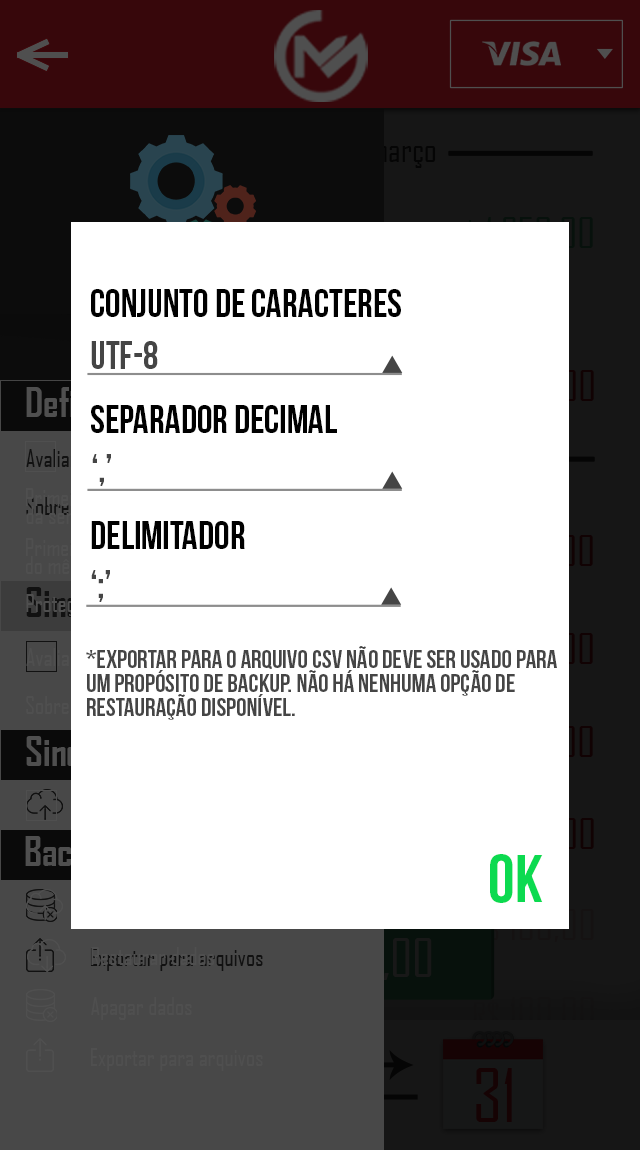
<style>
.page{position:relative;width:640px;height:1150px;background:#ffffff}
.page>*{position:absolute;margin:0}
.t1{font:39px "BebasNeue";color:#000000}
.t2{font:39px "BebasNeue";color:#454545}
.t3{font:26px/24px "BebasNeue";color:#454545}
.t4{font:67.7px "BebasNeue";color:#0cda50}
.t5{font:23.8px "AgencyFB-Reg";color:#4f4f4f}
</style>
<div class="page">
<p class="t1" style="left:91px;top:289px;width:310px;height:28px">Conjunto de caracteres</p>
<p class="t2" style="left:91px;top:341px;width:67px;height:28px">UTF-8</p>
<p class="t1" style="left:91px;top:405px;width:246px;height:28px">Separador decimal</p>
<p class="t2" style="left:92px;top:454px;width:19px;height:32px">‘,’</p>
<p class="t1" style="left:91px;top:521px;width:154px;height:28px">Delimitador</p>
<p class="t2" style="left:91px;top:570px;width:19px;height:32px">‘;’</p>
<p class="t3" style="left:86px;top:646px;width:471px;height:74px">*Exportar para o arquivo CSV não deve ser usado para <br>um propósito de backup. Não há nenhuma opção de <br>restauração disponível.</p>
<p class="t4" style="left:490px;top:854px;width:53px;height:49px">OK</p>
<p class="t5" style="left:91px;top:947px;width:123px;height:18px">Restaurar dados</p>
<p class="t5" style="left:91px;top:997px;width:101px;height:23px">Apagar dados</p>
<p class="t5" style="left:90px;top:1048px;width:173px;height:23px">Exportar para arquivos</p>
</div>
